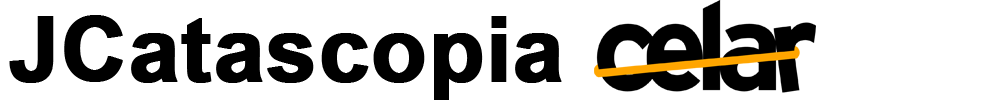
<style>
.page{position:relative;width:1000px;height:100px;background:#ffffff}
.page>*{position:absolute;margin:0}
.t1{font:90px "Arial-BoldMT";color:#000000;font-weight:bold}
</style>
<div class="page">
<p class="t1" style="left:9px;top:15px;width:553px;height:85px">JCatascopia</p>
</div>
